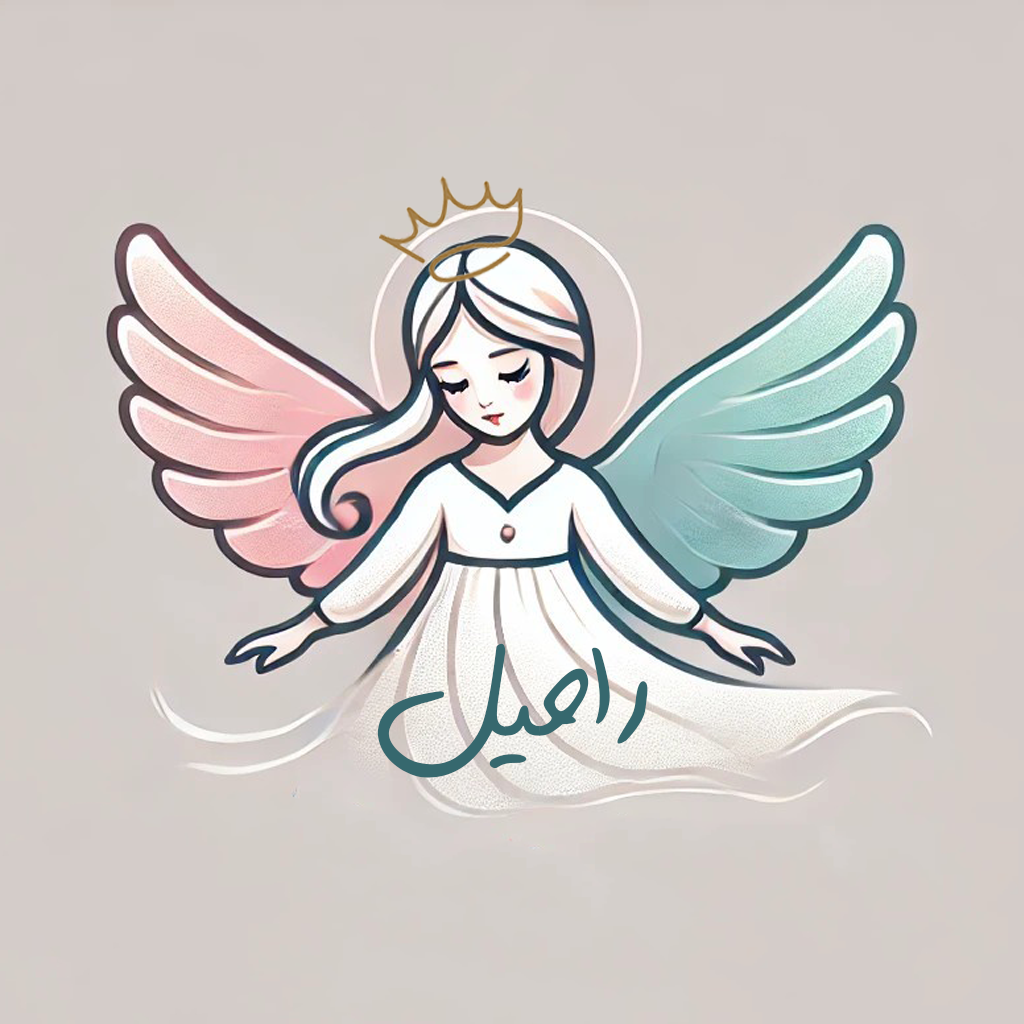
<style>
.page{position:relative;width:1024px;height:1024px}
.page>*{position:absolute;margin:0}
.t1{font:171.5px "AShekari";color:#36686e}
</style>
<div class="page">
<p class="t1" style="left:377px;top:643px;width:271px;height:135px">راحیل</p>
</div>
